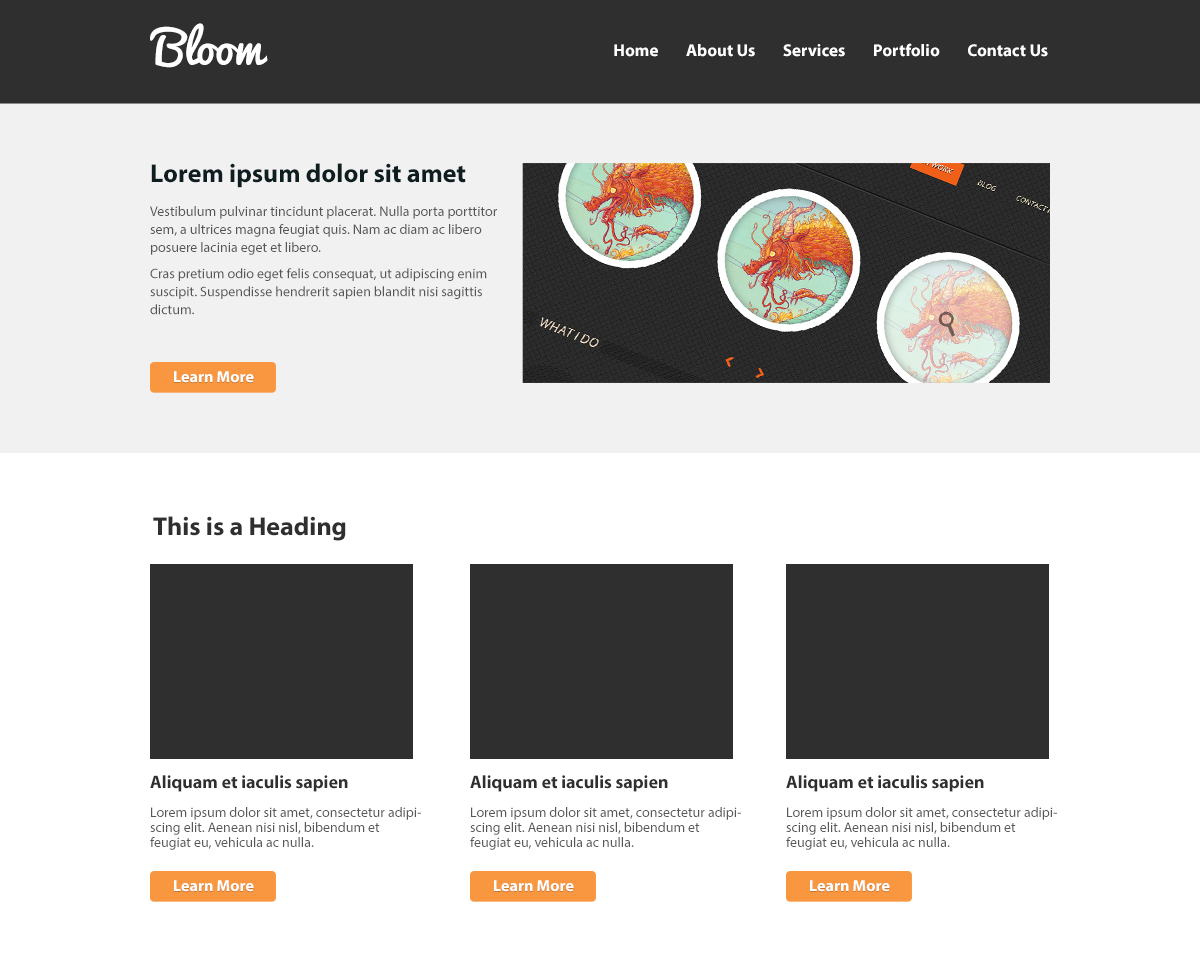
<style>
.page{position:relative;width:1200px;height:973px;background:#ffffff}
.page>*{position:absolute;margin:0}
.t1{font:45px "Pacifico";color:#ffffff}
.t2{font:17px "MyriadPro-Bold";color:#ffffff}
.t3{font:26px "MyriadPro-Bold";color:#0e1d1f}
.t4{font:14px/18px "MyriadPro-Regular";color:#565656}
.t5{font:16px "MyriadPro-Bold";color:#ffffff}
.t6{font:26px "MyriadPro-Bold";color:#2f2f2f}
.t7{font:18px "MyriadPro-Bold";color:#303030}
.t8{font:14px/15px "MyriadPro-Regular";color:#585858}
</style>
<div class="page">
<p class="t1" style="left:150px;top:23px;width:118px;height:45px">Bloom</p>
<p class="t2" style="left:614px;top:43px;width:434px;height:14px">Home        About Us        Services        Portfolio        Contact Us</p>
<p class="t3" style="left:151px;top:163px;width:315px;height:25px">Lorem ipsum dolor sit amet</p>
<p class="t4" style="left:150px;top:206px;width:347px;height:109px">Vestibulum pulvinar tincidunt placerat. Nulla porta porttitor sem, a ultrices magna feugiat quis. Nam ac diam ac libero posuere lacinia eget et libero. <br>Cras pretium odio eget felis consequat, ut adipiscing enim suscipit. Suspendisse hendrerit sapien blandit nisi sagittis dictum.</p>
<p class="t5" style="left:174px;top:371px;width:80px;height:12px">Learn More</p>
<p class="t6" style="left:153px;top:516px;width:193px;height:25px">This is a Heading</p>
<p class="t7" style="left:150px;top:775px;width:198px;height:17px">Aliquam et iaculis sapien</p>
<p class="t7" style="left:470px;top:775px;width:198px;height:17px">Aliquam et iaculis sapien</p>
<p class="t7" style="left:786px;top:775px;width:198px;height:17px">Aliquam et iaculis sapien</p>
<p class="t8" style="left:150px;top:807px;width:271px;height:43px">Lorem ipsum dolor sit amet, consectetur adipiscing elit. Aenean nisi nisl, bibendum et feugiat eu, vehicula ac nulla.</p>
<p class="t8" style="left:470px;top:807px;width:271px;height:43px">Lorem ipsum dolor sit amet, consectetur adipiscing elit. Aenean nisi nisl, bibendum et feugiat eu, vehicula ac nulla.</p>
<p class="t8" style="left:786px;top:807px;width:271px;height:43px">Lorem ipsum dolor sit amet, consectetur adipiscing elit. Aenean nisi nisl, bibendum et feugiat eu, vehicula ac nulla.</p>
<p class="t5" style="left:174px;top:880px;width:80px;height:12px">Learn More</p>
<p class="t5" style="left:494px;top:880px;width:80px;height:12px">Learn More</p>
<p class="t5" style="left:810px;top:880px;width:80px;height:12px">Learn More</p>
</div>
